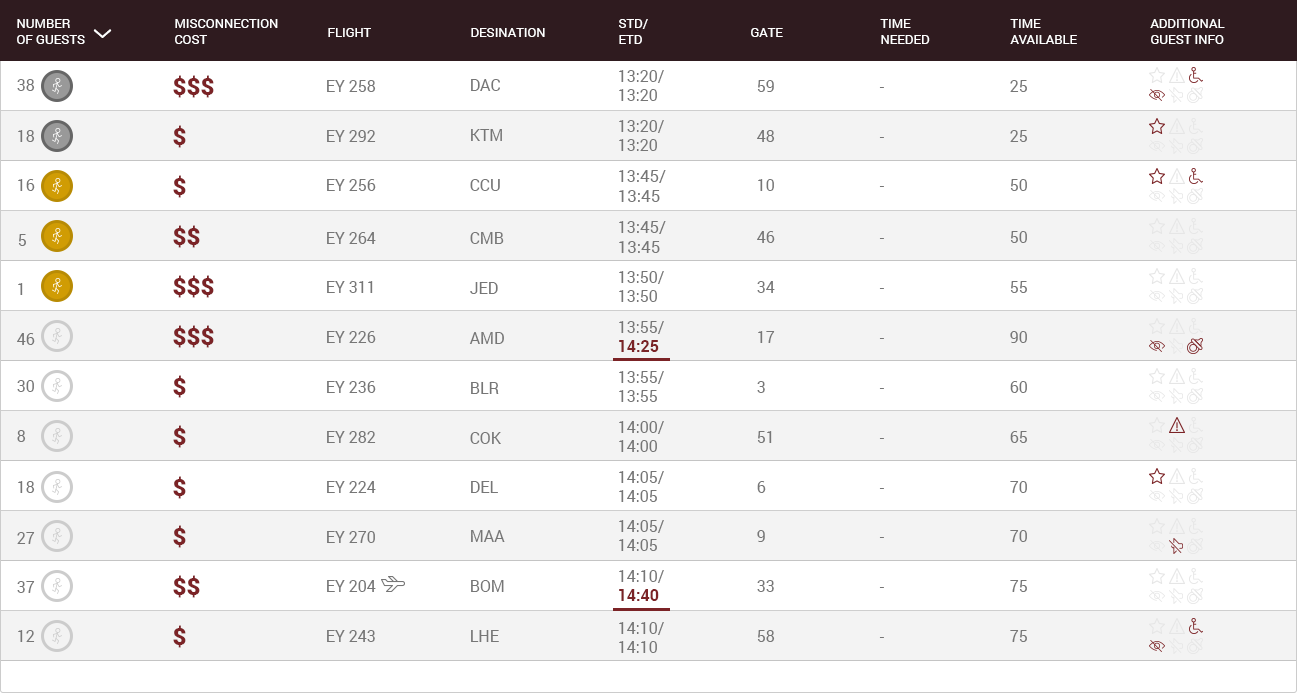
<style>
.page{position:relative;width:1297px;height:693px;background:#ffffff}
.page>*{position:absolute;margin:0}
.t1{font:13px "Roboto-Regular";color:#ffffff;text-transform:uppercase}
.t2{font:24px "Roboto-Black";color:#7b2326}
.t3{font:16px "Roboto-Regular";color:#767676}
.t4{font:17px "Roboto-Regular";color:#767676}
.t5{font:16px "Roboto-Bold";color:#7b2326}
</style>
<div class="page">
<p class="t1" style="left:17px;top:19px;width:68px;height:25px">Number<br>of Guests</p>
<p class="t1" style="left:175px;top:19px;width:103px;height:25px">Misconnection<br>Cost</p>
<p class="t1" style="left:328px;top:28px;width:43px;height:9px">Flight</p>
<p class="t1" style="left:471px;top:28px;width:74px;height:9px">Desination</p>
<p class="t1" style="left:619px;top:19px;width:29px;height:25px">STD/<br>ETD</p>
<p class="t1" style="left:751px;top:28px;width:32px;height:9px">Gate</p>
<p class="t1" style="left:880px;top:19px;width:50px;height:25px">Time<br>Needed</p>
<p class="t1" style="left:1010px;top:19px;width:67px;height:25px">Time<br>Available</p>
<p class="t1" style="left:1150px;top:19px;width:75px;height:25px">Additional <br>Guest Info</p>
<p class="t2" style="left:173px;top:75px;width:41px;height:23px">$$$</p>
<p class="t3" style="left:619px;top:70px;width:45px;height:31px">13:20/<br>13:20</p>
<p class="t3" style="left:17px;top:79px;width:18px;height:12px">38</p>
<p class="t3" style="left:327px;top:80px;width:49px;height:12px">EY 258</p>
<p class="t3" style="left:471px;top:79px;width:29px;height:12px">DAC</p>
<p class="t3" style="left:757px;top:80px;width:17px;height:12px">59</p>
<p class="t3" style="left:879px;top:87px;width:5px;height:1px">-</p>
<p class="t3" style="left:1010px;top:80px;width:17px;height:12px">25</p>
<p class="t2" style="left:173px;top:125px;width:13px;height:23px">$</p>
<p class="t3" style="left:619px;top:120px;width:45px;height:31px">13:20/<br>13:20</p>
<p class="t3" style="left:18px;top:130px;width:17px;height:12px">18</p>
<p class="t3" style="left:327px;top:130px;width:49px;height:12px">EY 292</p>
<p class="t3" style="left:471px;top:129px;width:31px;height:12px">KTM</p>
<p class="t3" style="left:757px;top:130px;width:18px;height:12px">48</p>
<p class="t3" style="left:879px;top:137px;width:5px;height:1px">-</p>
<p class="t3" style="left:1010px;top:130px;width:17px;height:12px">25</p>
<p class="t4" style="left:619px;top:170px;width:47px;height:32px"><span class="t3">13</span>:45/<br>13:45</p>
<p class="t3" style="left:18px;top:179px;width:17px;height:12px">16</p>
<p class="t2" style="left:173px;top:175px;width:13px;height:23px">$</p>
<p class="t3" style="left:327px;top:179px;width:49px;height:12px">EY 256</p>
<p class="t3" style="left:470px;top:179px;width:30px;height:12px">CCU</p>
<p class="t3" style="left:758px;top:179px;width:16px;height:12px">10</p>
<p class="t3" style="left:1010px;top:179px;width:17px;height:12px">50</p>
<p class="t3" style="left:879px;top:186px;width:5px;height:1px">-</p>
<p class="t4" style="left:619px;top:221px;width:47px;height:32px"><span class="t3">13</span>:45/<br>13:45</p>
<p class="t2" style="left:173px;top:225px;width:27px;height:23px">$$</p>
<p class="t3" style="left:327px;top:232px;width:49px;height:12px">EY 264</p>
<p class="t3" style="left:470px;top:232px;width:34px;height:12px">CMB</p>
<p class="t3" style="left:757px;top:231px;width:18px;height:12px">46</p>
<p class="t3" style="left:1010px;top:231px;width:17px;height:12px">50</p>
<p class="t3" style="left:18px;top:234px;width:8px;height:12px">5</p>
<p class="t3" style="left:879px;top:238px;width:5px;height:1px">-</p>
<p class="t2" style="left:173px;top:275px;width:41px;height:23px">$$$</p>
<p class="t3" style="left:327px;top:281px;width:46px;height:12px">EY 311</p>
<p class="t3" style="left:619px;top:271px;width:45px;height:31px">13:50/<br>13:50</p>
<p class="t3" style="left:757px;top:281px;width:18px;height:12px">34</p>
<p class="t3" style="left:1010px;top:281px;width:17px;height:12px">55</p>
<p class="t3" style="left:18px;top:283px;width:5px;height:12px">1</p>
<p class="t3" style="left:470px;top:282px;width:28px;height:12px">JED</p>
<p class="t3" style="left:879px;top:288px;width:5px;height:1px">-</p>
<p class="t2" style="left:173px;top:325px;width:41px;height:23px">$$$</p>
<p class="t3" style="left:619px;top:321px;width:45px;height:31px">13:55/<br><span class="t5">14:25</span></p>
<p class="t3" style="left:17px;top:333px;width:18px;height:12px">46</p>
<p class="t3" style="left:327px;top:331px;width:49px;height:12px">EY 226</p>
<p class="t3" style="left:469px;top:332px;width:35px;height:12px">AMD</p>
<p class="t3" style="left:758px;top:331px;width:17px;height:12px">17</p>
<p class="t3" style="left:879px;top:338px;width:5px;height:1px">-</p>
<p class="t3" style="left:1010px;top:331px;width:17px;height:12px">90</p>
<p class="t2" style="left:173px;top:375px;width:13px;height:23px">$</p>
<p class="t3" style="left:619px;top:371px;width:45px;height:31px">13:55/<br>13:55</p>
<p class="t3" style="left:17px;top:380px;width:17px;height:12px">30</p>
<p class="t3" style="left:327px;top:381px;width:49px;height:12px">EY 236</p>
<p class="t3" style="left:471px;top:382px;width:28px;height:12px">BLR</p>
<p class="t3" style="left:757px;top:381px;width:8px;height:12px">3</p>
<p class="t3" style="left:879px;top:388px;width:5px;height:1px">-</p>
<p class="t3" style="left:1010px;top:381px;width:17px;height:12px">60</p>
<p class="t2" style="left:173px;top:425px;width:13px;height:23px">$</p>
<p class="t3" style="left:619px;top:421px;width:45px;height:31px">14:00/<br>14:00</p>
<p class="t3" style="left:17px;top:430px;width:9px;height:12px">8</p>
<p class="t3" style="left:327px;top:431px;width:49px;height:12px">EY 282</p>
<p class="t3" style="left:470px;top:432px;width:31px;height:12px">COK</p>
<p class="t3" style="left:757px;top:431px;width:15px;height:12px">51</p>
<p class="t3" style="left:879px;top:438px;width:5px;height:1px">-</p>
<p class="t3" style="left:1010px;top:431px;width:17px;height:12px">65</p>
<p class="t3" style="left:619px;top:471px;width:45px;height:31px">14:05/<br>14:05</p>
<p class="t3" style="left:18px;top:481px;width:17px;height:12px">18</p>
<p class="t2" style="left:173px;top:476px;width:13px;height:23px">$</p>
<p class="t3" style="left:327px;top:481px;width:49px;height:12px">EY 224</p>
<p class="t3" style="left:471px;top:481px;width:27px;height:12px">DEL</p>
<p class="t3" style="left:757px;top:481px;width:9px;height:12px">6</p>
<p class="t3" style="left:1010px;top:481px;width:17px;height:12px">70</p>
<p class="t3" style="left:879px;top:488px;width:5px;height:1px">-</p>
<p class="t3" style="left:619px;top:520px;width:45px;height:31px">14:05/<br>14:05</p>
<p class="t3" style="left:17px;top:532px;width:18px;height:12px">27</p>
<p class="t2" style="left:173px;top:525px;width:13px;height:23px">$</p>
<p class="t3" style="left:327px;top:531px;width:48px;height:12px">EY 270</p>
<p class="t3" style="left:471px;top:530px;width:34px;height:12px">MAA</p>
<p class="t3" style="left:757px;top:530px;width:8px;height:12px">9</p>
<p class="t3" style="left:1010px;top:530px;width:17px;height:12px">70</p>
<p class="t3" style="left:879px;top:537px;width:5px;height:1px">-</p>
<p class="t3" style="left:17px;top:581px;width:18px;height:12px">37</p>
<p class="t2" style="left:173px;top:575px;width:27px;height:23px">$$</p>
<p class="t3" style="left:327px;top:580px;width:49px;height:12px">EY 204</p>
<p class="t3" style="left:471px;top:580px;width:33px;height:12px">BOM</p>
<p class="t3" style="left:619px;top:570px;width:45px;height:31px">14:10/<br><span class="t5">14:40</span></p>
<p class="t3" style="left:757px;top:580px;width:17px;height:12px">33</p>
<p class="t3" style="left:1010px;top:580px;width:17px;height:12px">75</p>
<p class="t3" style="left:879px;top:587px;width:5px;height:1px">-</p>
<p class="t3" style="left:18px;top:630px;width:17px;height:12px">12</p>
<p class="t2" style="left:173px;top:625px;width:13px;height:23px">$</p>
<p class="t3" style="left:327px;top:630px;width:48px;height:12px">EY 243</p>
<p class="t3" style="left:471px;top:630px;width:28px;height:12px">LHE</p>
<p class="t3" style="left:619px;top:622px;width:45px;height:31px">14:10/<br>14:10</p>
<p class="t3" style="left:757px;top:630px;width:18px;height:12px">58</p>
<p class="t3" style="left:1010px;top:630px;width:17px;height:12px">75</p>
<p class="t3" style="left:879px;top:637px;width:5px;height:1px">-</p>
</div>
